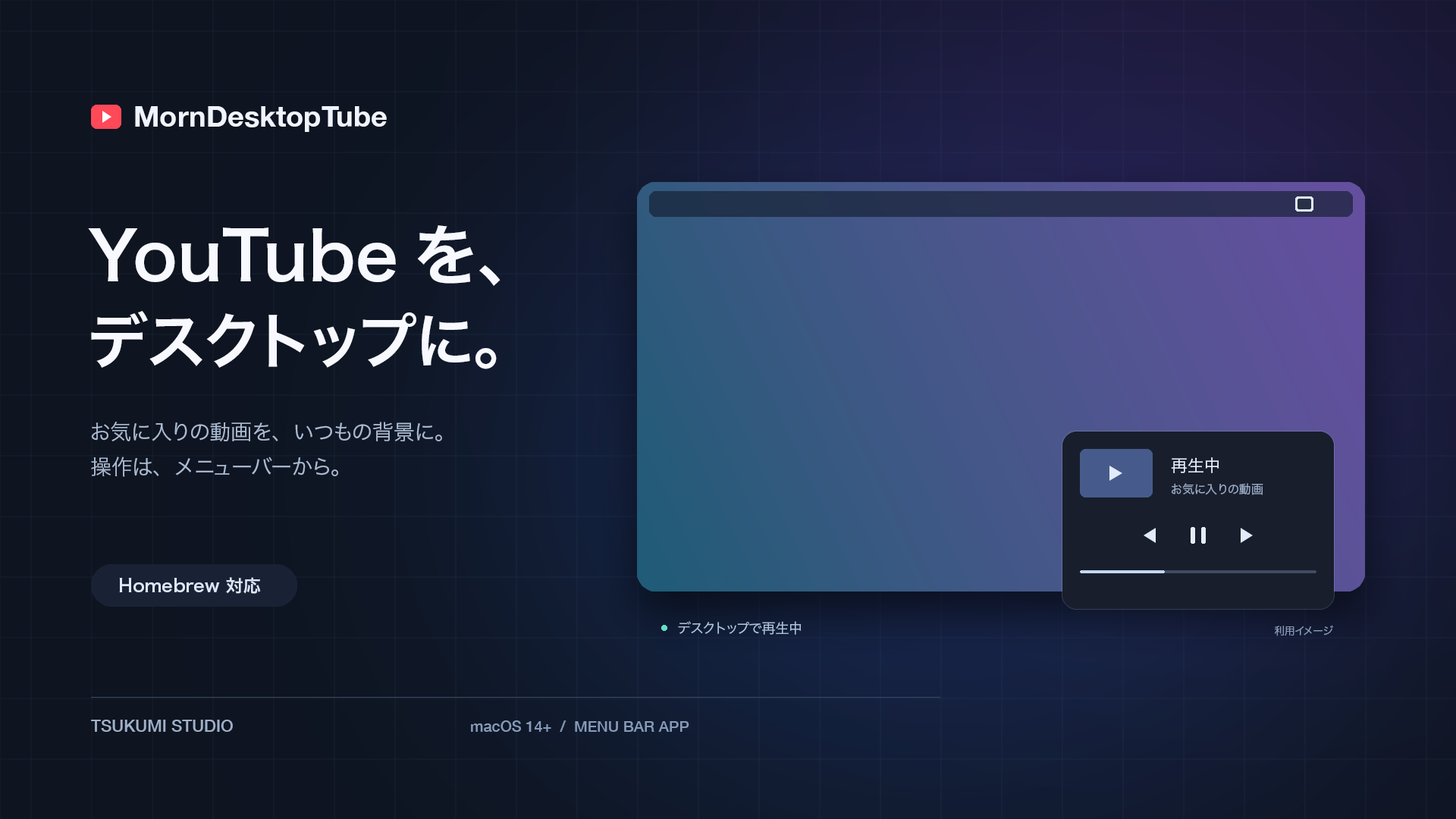
<style>
.page{position:relative;width:1456px;height:819px}
.page>*{position:absolute;margin:0}
.t1{font:28.8px "HelveticaNeue-Bold";color:#eff4ff}
.t2{font:66.7px "HiraginoSans-W6";color:#f7f9ff}
.t3{font:60.7px "HiraginoSans-W6";color:#f7f9ff}
.t4{font:21.2px "HiraginoSans-W3";color:#abbbd2}
.t5{font:16.7px "HiraginoSans-W3";color:#e7eefb}
.t6{font:12.1px "HiraginoSans-W3";color:#97a9c4}
.t7{font:17.4px "HiraginoSans-W6";color:#dce8fa}
.t8{font:13.6px "HiraginoSans-W3";color:#adc5dd}
.t9{font:10.6px "HiraginoSans-W3";color:#879ab8}
.t10{font:16.7px "HelveticaNeue-Medium";color:#9fb0c9}
.t11{font:15.2px "HelveticaNeue-Medium";color:#879ab8}
</style>
<div class="page">
<p class="t1" style="left:135px;top:106px;width:252px;height:26px">MornDesktopTube</p>
<p class="t2" style="left:88px;top:225px;width:412px;height:61px">YouTubeを、</p>
<p class="t3" style="left:91px;top:311px;width:406px;height:58px">デスクトップに。</p>
<p class="t4" style="left:91px;top:422px;width:351px;height:20px">お気に入りの動画を、いつもの背景に。</p>
<p class="t4" style="left:91px;top:457px;width:247px;height:20px">操作は、メニューバーから。</p>
<p class="t5" style="left:1171px;top:457px;width:48px;height:16px">再生中</p>
<p class="t6" style="left:1172px;top:483px;width:91px;height:12px">お気に入りの動画</p>
<p class="t7" style="left:119px;top:577px;width:142px;height:17px">Homebrew 対応</p>
<p class="t8" style="left:678px;top:621px;width:124px;height:14px">デスクトップで再生中</p>
<p class="t9" style="left:1274px;top:625px;width:59px;height:11px">利用イメージ</p>
<p class="t10" style="left:91px;top:720px;width:142px;height:12px">TSUKUMI STUDIO</p>
<p class="t11" style="left:471px;top:720px;width:218px;height:12px">macOS 14+  /  MENU BAR APP</p>
</div>
